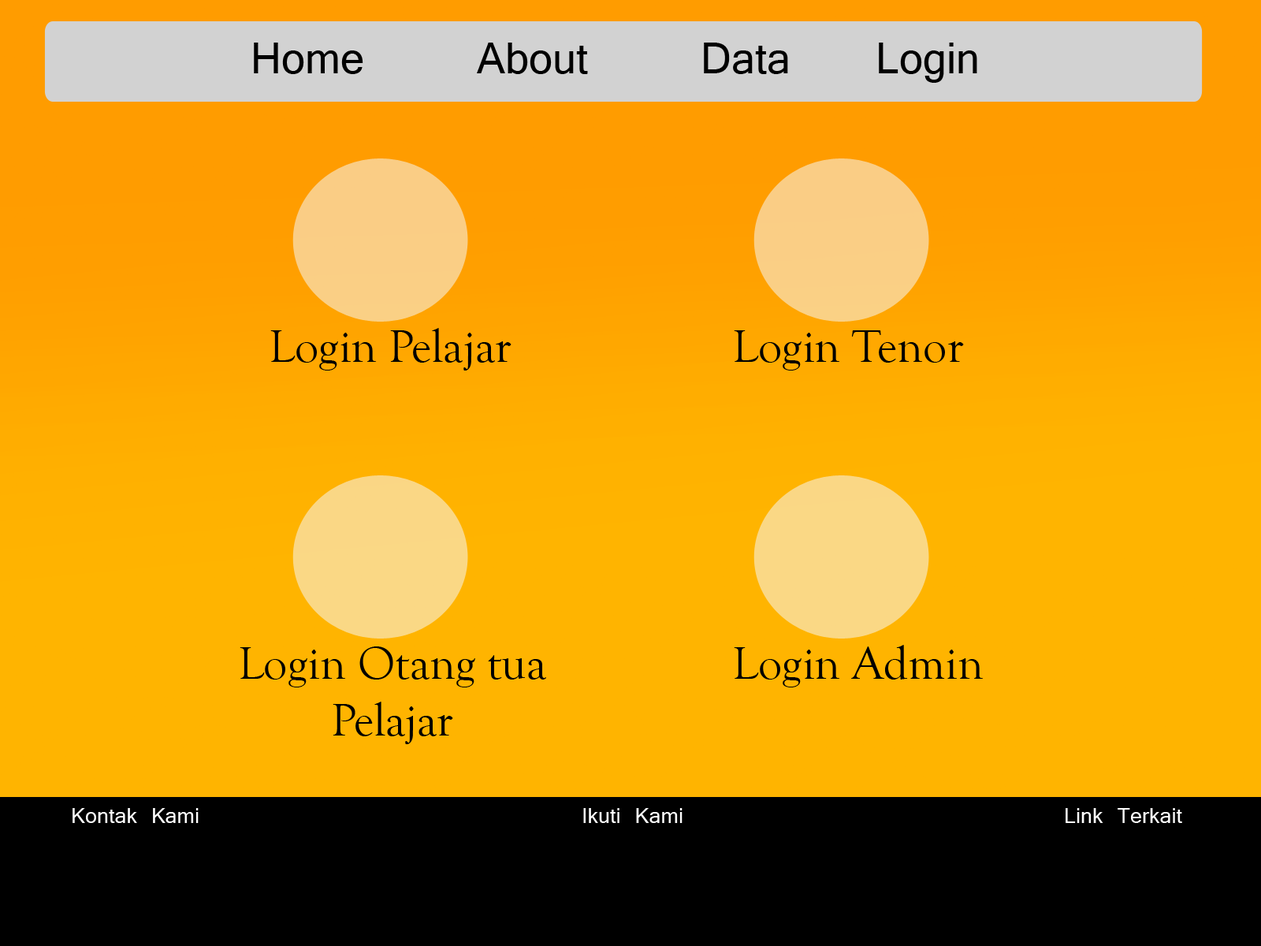
<style>
.page{position:relative;width:1261px;height:946px;background:#ffb400}
.page>*{position:absolute;margin:0}
.t1{font:47.3px "Vrinda";color:#000000}
.t2{font:47.3px "GoudyOldStyleT-Regular";color:#000000}
.t3{font:23.6px "Vrinda";color:#ffffff}
</style>
<div class="page">
<p class="t1" style="left:254px;top:43px;width:723px;height:40px">Home     About    Data   Login</p>
<p class="t2" style="left:270px;top:328px;width:241px;height:42px">Login Pelajar</p>
<p class="t2" style="left:734px;top:330px;width:230px;height:40px">Login Tenor</p>
<p class="t2" style="left:240px;top:646px;width:306px;height:98px;text-align:center">Login Otang tua<br>Pelajar</p>
<p class="t2" style="left:734px;top:645px;width:250px;height:42px">Login Admin</p>
<p class="t3" style="left:73px;top:808px;width:1109px;height:15px">Kontak Kami              Ikuti Kami              Link Terkait</p>
</div>
